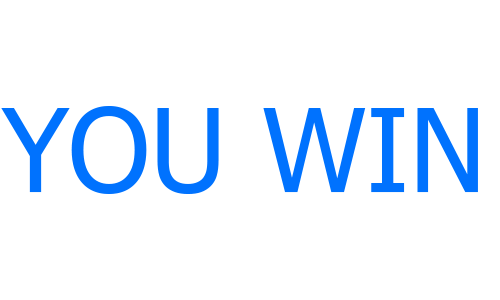
<style>
.page{position:relative;width:500px;height:300px;background:#ffffff}
.page>*{position:absolute;margin:0}
.t1{font:115.8px "Tahoma";color:#0072fe}
</style>
<div class="page">
<p class="t1" style="left:1px;top:106px;width:477px;height:88px">YOU WIN</p>
</div>
